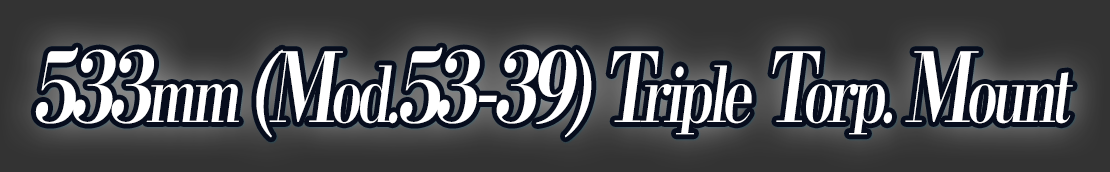
<style>
.page{position:relative;width:1110px;height:172px;background:#333333}
.page>*{position:absolute;margin:0}
.t1{font:96px "KochoStd-Heavy";letter-spacing:-0.08em;color:#ffffff;font-style:italic;scale:0.73 1}
.t2{font:76.8px "KochoStd-Heavy";letter-spacing:-0.08em;color:#ffffff;font-style:italic;scale:0.73 1}
</style>
<div class="page">
<p class="t1" style="left:35px;top:47px;width:1038px;height:91px">533<span class="t2">mm </span>(M<span class="t2">od.</span>53-39) T<span class="t2">riple</span> T<span class="t2">orp. </span>M<span class="t2">ount</span></p>
</div>
